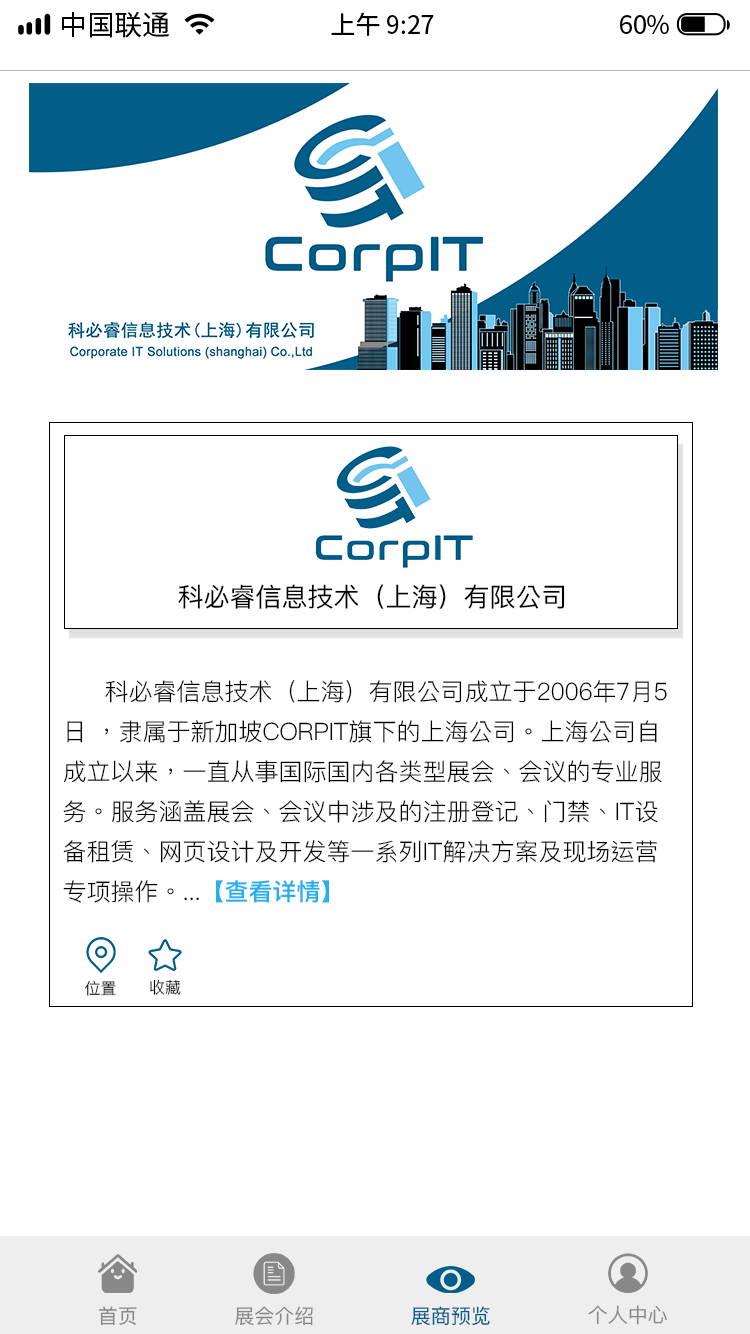
<style>
.page{position:relative;width:750px;height:1334px;background:#ffffff}
.page>*{position:absolute;margin:0}
.t1{font:27.8px "SourceHanSansCN-Regular";color:#000000}
.t2{font:25px "SourceHanSansCN-Regular";color:#000000}
.t3{font:26px "PingFangTC";color:#000000}
.t4{font:24px/40px "PingFangTC-Light";color:#000000}
.t5{font:20px "PingFangTC-Light";color:#000000}
.t6{font:24px/40px "PingFangTC-Semibold";color:#26b0f0}
.t7{font:16px "PingFangTC-Light";color:#000000}
.t8{font:20px "PingFangTC";color:#888888}
.t9{font:20px "PingFangTC";color:#015e89}
</style>
<div class="page">
<p class="t1" style="left:62px;top:12px;width:107px;height:26px">中国联通</p>
<p class="t2" style="left:331px;top:12px;width:103px;height:24px">上午 9:27</p>
<p class="t2" style="left:620px;top:15px;width:49px;height:19px">60%</p>
<p class="t3" style="left:178px;top:584px;width:387px;height:25px">科必睿信息技术（上海）有限公司</p>
<p class="t4" style="left:63px;top:680px;width:604px;height:223px"><span class="t5">      </span>科必睿信息技术（上海）有限公司成立于2006年7月5<br>日 ，隶属于新加坡CORPIT旗下的上海公司。上海公司自<br>成立以来，一直从事国际国内各类型展会、会议的专业服<br>务。服务涵盖展会、会议中涉及的注册登记、门禁、IT设<br>备租赁、网页设计及开发等一系列IT解决方案及现场运营<br>专项操作。...<span class="t6">【查看详情】</span></p>
<p class="t7" style="left:85px;top:980px;width:31px;height:16px">位置</p>
<p class="t7" style="left:150px;top:979px;width:31px;height:16px">收藏</p>
<p class="t8" style="left:99px;top:1306px;width:38px;height:20px">首页</p>
<p class="t8" style="left:235px;top:1306px;width:78px;height:20px">展会介绍</p>
<p class="t9" style="left:411px;top:1306px;width:79px;height:20px">展商预览</p>
<p class="t8" style="left:588px;top:1305px;width:79px;height:20px">个人中心</p>
</div>
